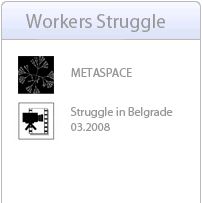
<style>
.page{position:relative;width:202px;height:203px;background:#ffffff}
.page>*{position:absolute;margin:0}
.t1{font:19.5px "MyriadPro-Regular";color:#989898}
.t2{font:12px "MyriadPro-Regular";color:#989898}
</style>
<div class="page">
<p class="t1" style="left:26px;top:14px;width:139px;height:18px">Workers Struggle</p>
<p class="t2" style="left:71px;top:68px;width:61px;height:9px">METASPACE</p>
<p class="t2" style="left:70px;top:107px;width:103px;height:24px">Struggle in Belgrade<br>03.2008</p>
</div>
